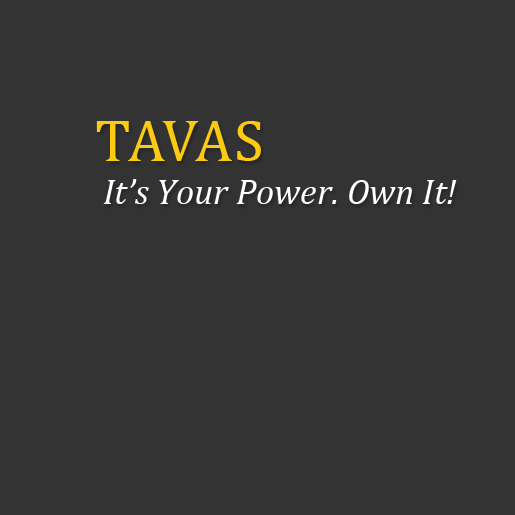
<style>
.page{position:relative;width:515px;height:515px;background:#333333}
.page>*{position:absolute;margin:0}
.t1{font:36px "Cambria-Italic";color:#ffffff}
.t2{font:60px "Cambria";letter-spacing:-0.05em;color:#fcc913}
.t3{font:60px "Cambria";letter-spacing:0.025em;color:#fcc913}
</style>
<div class="page">
<p class="t1" style="left:96px;top:121px;width:361px;height:83px"><span class="t2">TAV</span><span class="t3">AS<br></span> It’s Your Power. Own It!</p>
</div>
